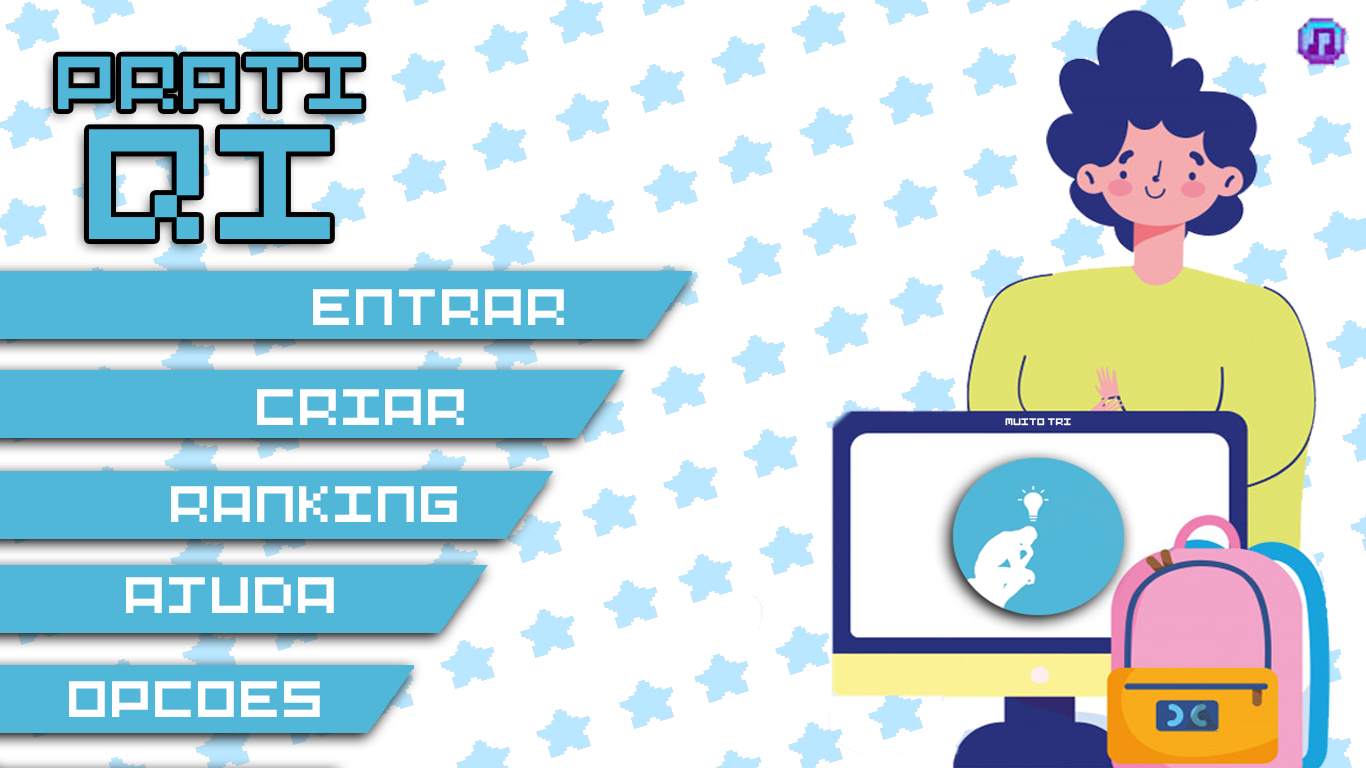
<style>
.page{position:relative;width:1366px;height:768px;background:#ffffff}
.page>*{position:absolute;margin:0}
.t1{font:83.5px "Pixel-Art";color:#51b7d8}
.t2{font:175.3px "Pixel-Art";color:#51b7d8}
.t3{font:57.1px "Pixel-Art";color:#ffffff}
.t4{font:10.6px "Pixel-Art";color:#ffffff}
</style>
<div class="page">
<p class="t1" style="left:58px;top:56px;width:304px;height:53px">prati</p>
<p class="t2" style="left:89px;top:129px;width:241px;height:110px">qi</p>
<p class="t3" style="left:313px;top:289px;width:251px;height:36px">entrar</p>
<p class="t3" style="left:257px;top:389px;width:207px;height:36px">criar</p>
<p class="t4" style="left:1005px;top:418px;width:66px;height:8px">muito tri</p>
<p class="t3" style="left:171px;top:486px;width:286px;height:36px">ranking</p>
<p class="t3" style="left:126px;top:577px;width:208px;height:36px">ajuda</p>
<p class="t3" style="left:69px;top:681px;width:251px;height:36px">opcoes</p>
</div>
